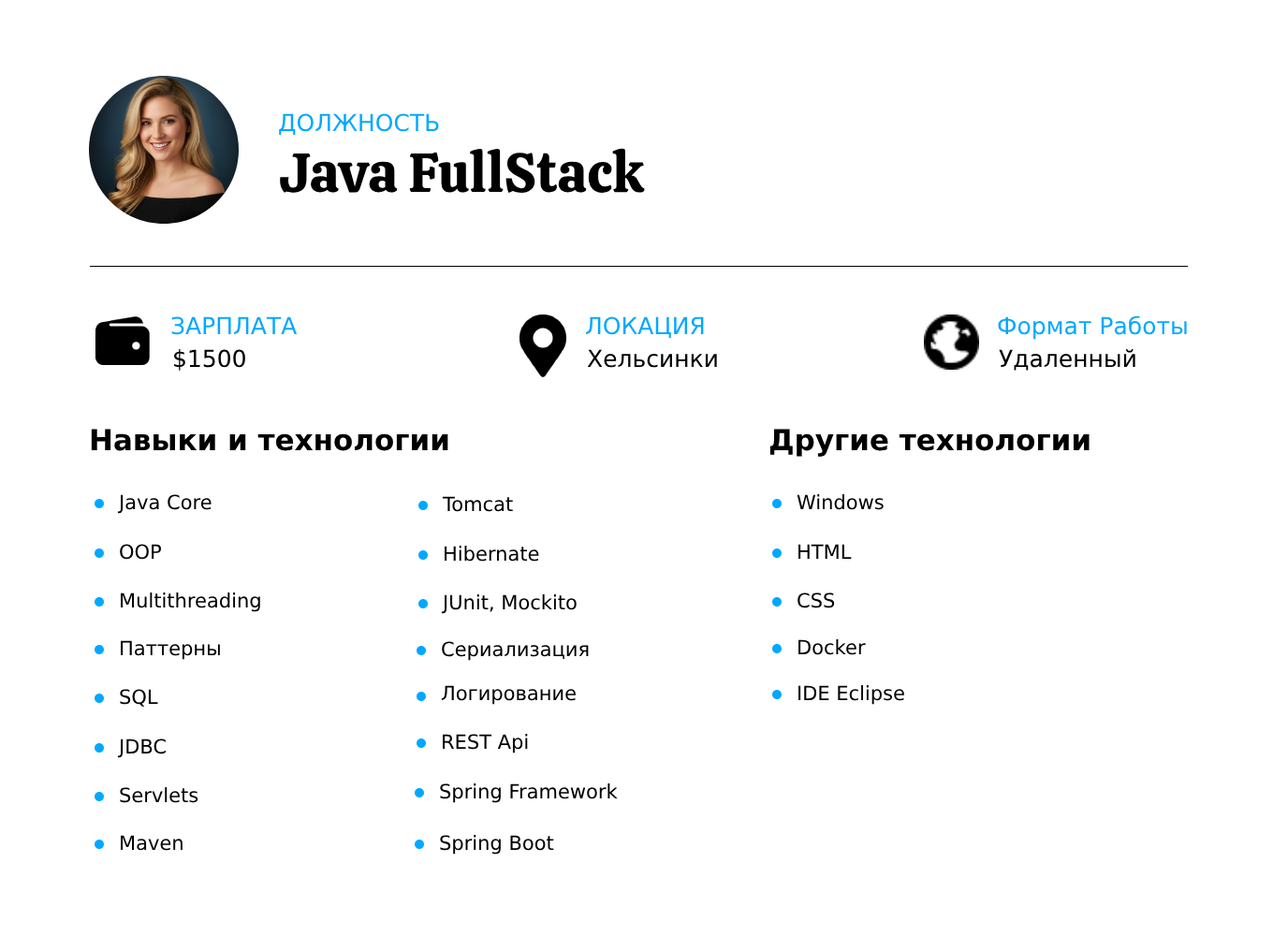
<style>
.page{position:relative;width:1273px;height:936px;background:#ffffff}
.page>*{position:absolute;margin:0}
.t1{font:23.4px "DejaVuSans";color:#00a8ff}
.t2{font:55.2px "Calistoga-Regular";color:#000000}
.t3{font:23.4px "DejaVuSans";color:#000000}
.t4{font:29px "DejaVuSans-Bold";color:#000000}
.t5{font:19.7px "DejaVuSans";color:#000000}
</style>
<div class="page">
<p class="t1" style="left:279px;top:113px;width:160px;height:22px">ДОЛЖНОСТЬ</p>
<p class="t2" style="left:280px;top:148px;width:365px;height:45px">Java FullStack</p>
<p class="t1" style="left:171px;top:316px;width:127px;height:19px">ЗАРПЛАТА</p>
<p class="t1" style="left:586px;top:316px;width:118px;height:22px">ЛОКАЦИЯ</p>
<p class="t1" style="left:998px;top:316px;width:189px;height:24px">Формат Работы</p>
<p class="t3" style="left:174px;top:349px;width:71px;height:22px">$1500</p>
<p class="t3" style="left:587px;top:349px;width:130px;height:19px">Хельсинки</p>
<p class="t3" style="left:999px;top:349px;width:137px;height:22px">Удаленный</p>
<p class="t4" style="left:91px;top:429px;width:358px;height:22px">Навыки и технологии</p>
<p class="t4" style="left:770px;top:429px;width:320px;height:28px">Другие технологии</p>
<p class="t5" style="left:117px;top:494px;width:95px;height:20px">Java Core</p>
<p class="t5" style="left:442px;top:496px;width:71px;height:16px">Tomcat</p>
<p class="t5" style="left:797px;top:494px;width:87px;height:16px">Windows</p>
<p class="t5" style="left:120px;top:544px;width:42px;height:16px">OOP</p>
<p class="t5" style="left:445px;top:546px;width:94px;height:16px">Hibernate</p>
<p class="t5" style="left:799px;top:544px;width:53px;height:15px">HTML</p>
<p class="t5" style="left:121px;top:593px;width:139px;height:19px">Multithreading</p>
<p class="t5" style="left:798px;top:593px;width:37px;height:16px">CSS</p>
<p class="t5" style="left:441px;top:595px;width:136px;height:19px">JUnit, Mockito</p>
<p class="t5" style="left:121px;top:640px;width:99px;height:20px">Паттерны</p>
<p class="t5" style="left:442px;top:641px;width:147px;height:20px">Сериализация</p>
<p class="t5" style="left:799px;top:640px;width:67px;height:15px">Docker</p>
<p class="t5" style="left:120px;top:689px;width:38px;height:18px">SQL</p>
<p class="t5" style="left:441px;top:685px;width:135px;height:20px">Логирование</p>
<p class="t5" style="left:799px;top:685px;width:106px;height:20px">IDE Eclipse</p>
<p class="t5" style="left:443px;top:734px;width:85px;height:20px">REST Api</p>
<p class="t5" style="left:117px;top:739px;width:49px;height:19px">JDBC</p>
<p class="t5" style="left:440px;top:784px;width:178px;height:19px">Spring Framework</p>
<p class="t5" style="left:120px;top:787px;width:79px;height:16px">Servlets</p>
<p class="t5" style="left:121px;top:835px;width:62px;height:16px">Maven</p>
<p class="t5" style="left:440px;top:835px;width:114px;height:20px">Spring Boot</p>
</div>
